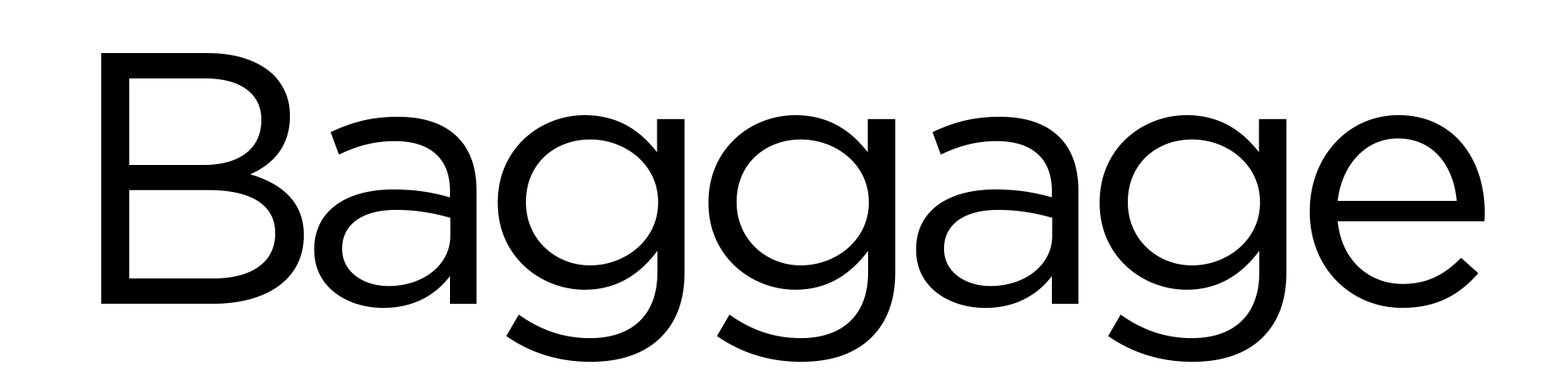
<style>
.page{position:relative;width:1568px;height:392px;background:#ffffff}
.page>*{position:absolute;margin:0}
.t1{font:357.7px "Gotham-Book";letter-spacing:-0.075em;color:#000000}
</style>
<div class="page">
<p class="t1" style="left:101px;top:53px;width:1384px;height:310px">Baggage</p>
</div>
